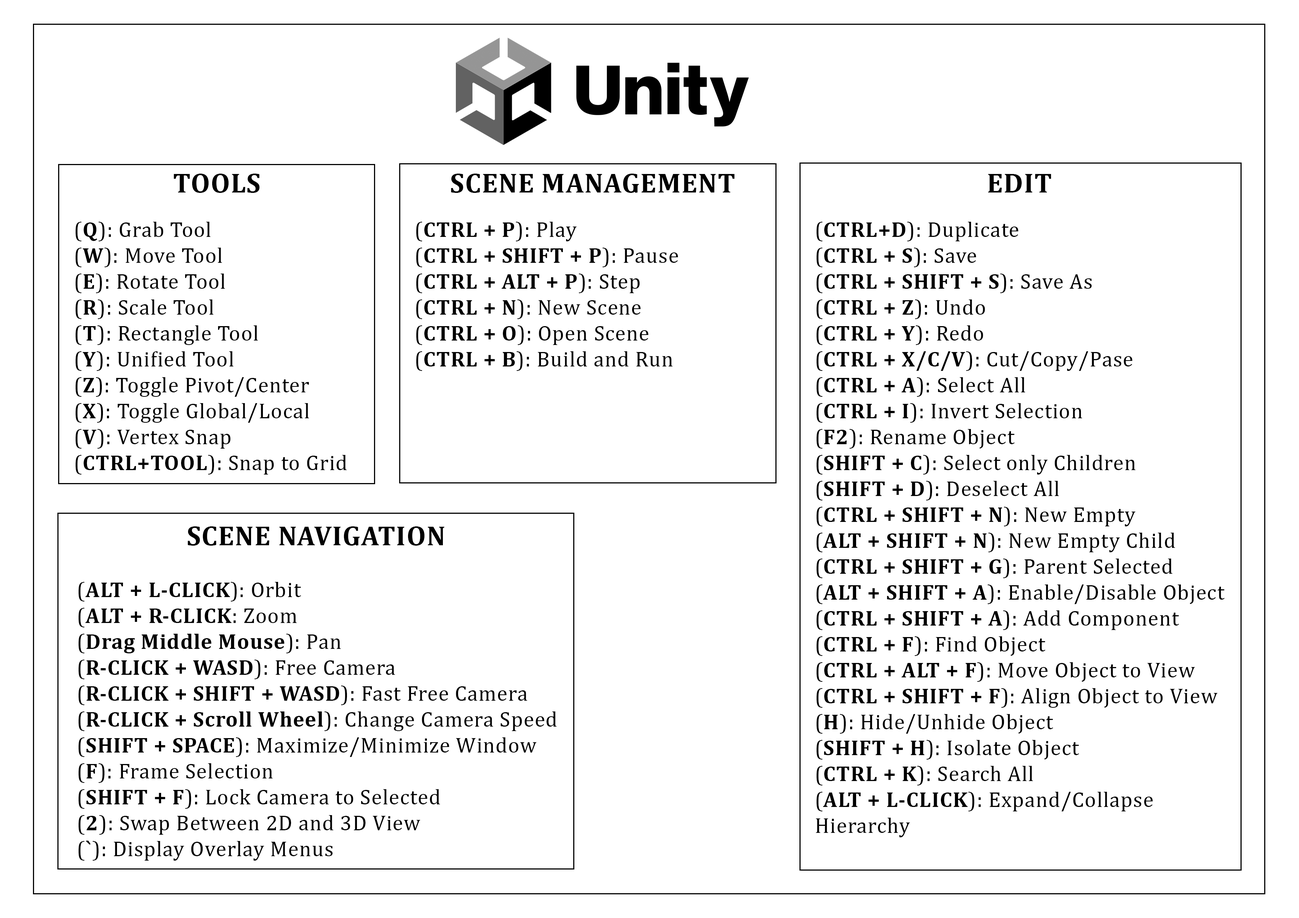
<style>
.page{position:relative;width:1299px;height:918px;background:#ffffff}
.page>*{position:absolute;margin:0}
.t1{font:27.8px "Cambria-Bold";letter-spacing:0.025em;color:#000000}
.t2{font:21.6px "Cambria";letter-spacing:0.025em;color:#000000}
.t3{font:21.6px "Cambria-Bold";letter-spacing:0.025em;color:#000000}
</style>
<div class="page">
<p class="t1" style="left:174px;top:174px;width:86px;height:19px">TOOLS</p>
<p class="t1" style="left:451px;top:174px;width:284px;height:19px">SCENE MANAGEMENT</p>
<p class="t1" style="left:988px;top:174px;width:63px;height:19px">EDIT</p>
<p class="t2" style="left:76px;top:222px;width:271px;height:253px">(<span class="t3">Q</span>): Grab Tool<br>(<span class="t3">W</span>): Move Tool<br>(<span class="t3">E</span>): Rotate Tool<br>(<span class="t3">R</span>): Scale Tool<br>(<span class="t3">T</span>): Rectangle Tool<br>(<span class="t3">Y</span>): Unified Tool<br>(<span class="t3">Z</span>): Toggle Pivot/Center<br>(<span class="t3">X</span>): Toggle Global/Local<br>(<span class="t3">V</span>): Vertex Snap<br>(<span class="t3">CTRL+TOOL</span>): Snap to Grid</p>
<p class="t3" style="left:416px;top:222px;width:262px;height:149px"><span class="t2">(</span>CTRL + P<span class="t2">): Play<br>(</span>CTRL + SHIFT + P<span class="t2">): Pause<br>(</span>CTRL + ALT + P<span class="t2">): Step<br>(</span>CTRL + N<span class="t2">): New Scene<br>(</span>CTRL + O<span class="t2">): Open Scene<br>(</span>CTRL + B<span class="t2">): Build and Run</span></p>
<p class="t2" style="left:816px;top:222px;width:408px;height:615px">(<span class="t3">CTRL+D</span>): Duplicate<br>(<span class="t3">CTRL + S</span>): Save<br>(<span class="t3">CTRL + SHIFT + S</span>): Save As<br>(<span class="t3">CTRL + Z</span>): Undo<br>(<span class="t3">CTRL + Y</span>): Redo<br>(<span class="t3">CTRL + X/C/V</span>): Cut/Copy/Pase<br>(<span class="t3">CTRL + A</span>): Select All<br>(<span class="t3">CTRL + I</span>): Invert Selection<br>(<span class="t3">F2</span>): Rename Object<br>(<span class="t3">SHIFT + C</span>): Select only Children<br>(<span class="t3">SHIFT + D</span>): Deselect All<br>(<span class="t3">CTRL + SHIFT + N</span>): New Empty<br>(<span class="t3">ALT + SHIFT + N</span>): New Empty Child<br>(<span class="t3">CTRL + SHIFT + G</span>): Parent Selected<br>(<span class="t3">ALT + SHIFT + A</span>): Enable/Disable Object<br>(<span class="t3">CTRL + SHIFT + A</span>): Add Component<br>(<span class="t3">CTRL + F</span>): Find Object<br>(<span class="t3">CTRL + ALT + F</span>): Move Object to View<br>(<span class="t3">CTRL + SHIFT + F</span>): Align Object to View<br>(<span class="t3">H</span>): Hide/Unhide Object<br>(<span class="t3">SHIFT + H</span>): Isolate Object<br>(<span class="t3">CTRL + K</span>): Search All<br>(<span class="t3">ALT + L-CLICK</span>): Expand/Collapse Hierarchy</p>
<p class="t1" style="left:188px;top:526px;width:256px;height:20px">SCENE NAVIGATION</p>
<p class="t2" style="left:78px;top:582px;width:479px;height:279px">(<span class="t3">ALT + L-CLICK</span>): Orbit<br>(<span class="t3">ALT + R-CLICK</span>: Zoom<br>(<span class="t3">Drag Middle Mouse</span>): Pan<br>(<span class="t3">R-CLICK + WASD</span>): Free Camera<br>(<span class="t3">R-CLICK + SHIFT + WASD</span>): Fast Free Camera<br>(<span class="t3">R-CLICK + Scroll Wheel</span>): Change Camera Speed<br>(<span class="t3">SHIFT + SPACE</span>): Maximize/Minimize Window<br>(<span class="t3">F</span>): Frame Selection<br>(<span class="t3">SHIFT + F</span>): Lock Camera to Selected<br>(<span class="t3">2</span>): Swap Between 2D and 3D View<br>(<span class="t3">`</span>): Display Overlay Menus</p>
</div>
